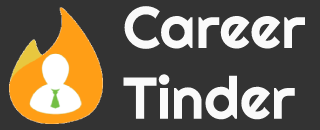
<style>
.page{position:relative;width:320px;height:130px;background:#333333}
.page>*{position:absolute;margin:0}
.t1{font:59px "Righteous-Regular";color:#fafafa}
</style>
<div class="page">
<p class="t1" style="left:123px;top:6px;width:182px;height:114px">Career<br>Tinder</p>
</div>
